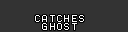
<style>
.page{position:relative;width:128px;height:32px;background:#333333}
.page>*{position:absolute;margin:0}
.t1{font:10px/8px "Terminal";color:#ffffff}
</style>
<div class="page">
<p class="t1" style="left:35px;top:15px;width:49px;height:15px;text-align:center">CATCHES<br>GHOST</p>
</div>
